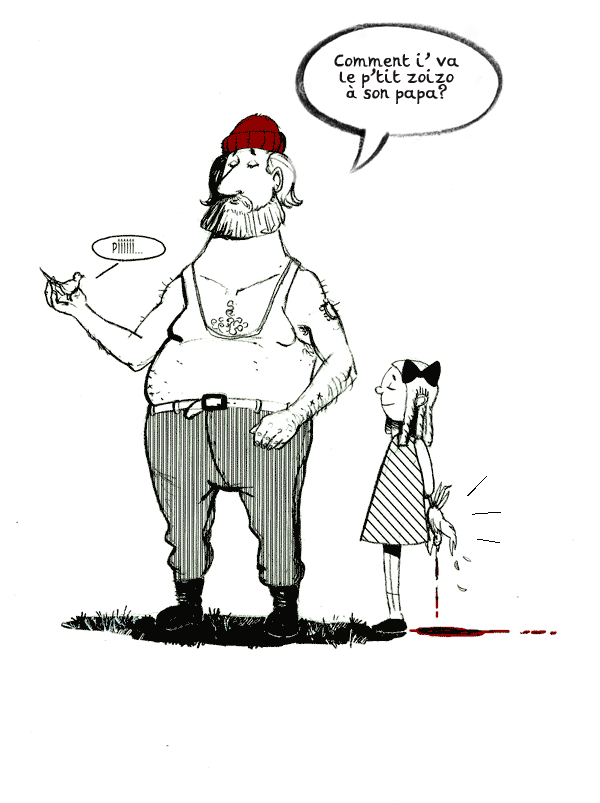
<style>
.page{position:relative;width:600px;height:803px;background:#ffffff}
.page>*{position:absolute;margin:0}
.t1{font:14px/16px "VH_Normal";color:#191414}
</style>
<div class="page">
<p class="t1" style="left:334px;top:52px;width:125px;height:52px;text-align:center">Comment i’ va<br>le p’tit zoizo<br>à son papa?</p>
</div>
